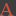
<style>
.page{position:relative;width:16px;height:16px;background:#3d3d3d}
.page>*{position:absolute;margin:0}
.t1{font:20px "TimesNewRomanPSMT";color:#dd4b39}
</style>
<div class="page">
<p class="t1" style="left:0px;top:3px;width:14px;height:13px">A</p>
</div>
